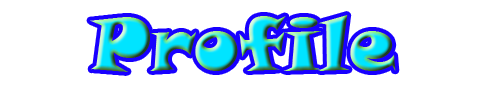
<style>
.page{position:relative;width:504px;height:90px;background:#ffffff}
.page>*{position:absolute;margin:0}
.t1{font:74.3px "SnapITC-Regular"}
</style>
<div class="page">
<p class="t1" style="left:90px;top:15px;width:306px;height:57px">Profile</p>
</div>
